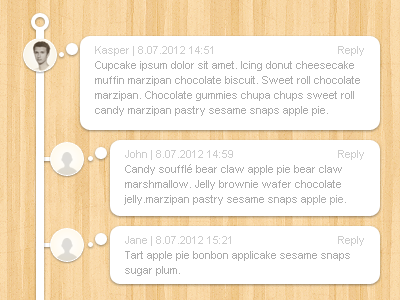
<style>
.page{position:relative;width:400px;height:300px;background:#ffffff}
.page>*{position:absolute;margin:0}
.t1{font:11px/15px "ArialMT";color:#aaaaaa}
.t2{font:11px/16px "ArialMT";color:#cccccc}
.t3{font:11px "ArialMT";color:#cccccc}
.t4{font:11px/15px "ArialMT";color:#b1b1b1}
</style>
<div class="page">
<p class="t1" style="left:95px;top:46px;width:265px;height:70px"><span class="t2">Kasper | 8.07.2012 14:51 <br></span>Cupcake ipsum dolor sit amet. Icing donut cheesecake muffin marzipan chocolate biscuit. Sweet roll chocolate marzipan. Chocolate gummies chupa chups sweet roll candy marzipan pastry sesame snaps apple pie.</p>
<p class="t3" style="left:338px;top:46px;width:26px;height:10px">Reply</p>
<p class="t1" style="left:124px;top:150px;width:222px;height:55px"><span class="t2">John | 8.07.2012 14:59<br></span>Candy soufflé bear claw apple pie bear claw marshmallow. Jelly brownie wafer chocolate jelly.marzipan pastry sesame snaps ap<span class="t4">ple pie.</span></p>
<p class="t3" style="left:338px;top:150px;width:26px;height:10px">Reply</p>
<p class="t1" style="left:125px;top:236px;width:225px;height:40px"><span class="t2">Jane | 8.07.2012 15:21<br></span>Tart apple pie bonbon applicake sesame snaps sugar plum.</p>
<p class="t3" style="left:338px;top:236px;width:26px;height:10px">Reply</p>
</div>
